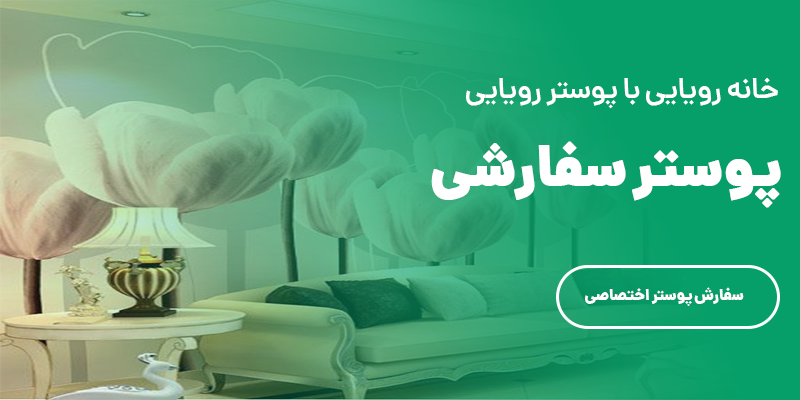
<style>
.page{position:relative;width:800px;height:400px}
.page>*{position:absolute;margin:0}
.t1{font:29.5px "dana-demibold";letter-spacing:-0.02em;color:#ffffff}
.t2{font:56px "dana-black";letter-spacing:-0.02em;color:#ffffff;font-weight:bold}
.t3{font:16px "dana-black";letter-spacing:-0.02em;color:#ffffff}
</style>
<div class="page">
<p class="t1" style="left:466px;top:77px;width:312px;height:32px">خانه رویایی با پوستر رویایی</p>
<p class="t2" style="left:431px;top:141px;width:350px;height:67px">پوستر سفارشی</p>
<p class="t3" style="left:585px;top:287px;width:159px;height:19px">سفارش پوستر اختصاصی</p>
</div>
